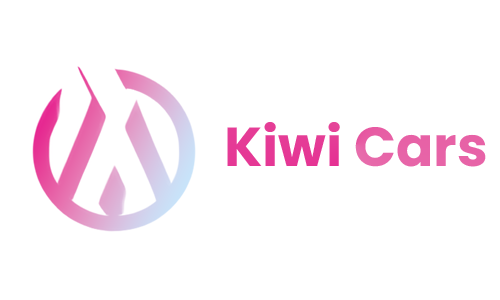
<style>
.page{position:relative;width:500px;height:300px;background:#ffffff}
.page>*{position:absolute;margin:0}
.t1{font:55px "Poppins-Bold"}
</style>
<div class="page">
<p class="t1" style="left:227px;top:122px;width:259px;height:45px">Kiwi Cars</p>
</div>
